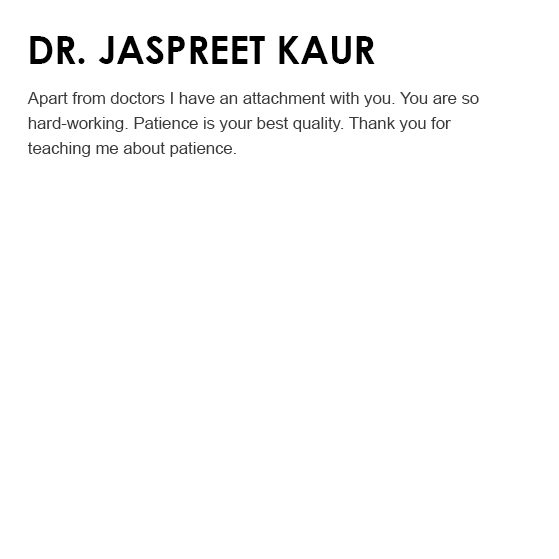
<style>
.page{position:relative;width:559px;height:559px;background:#ffffff}
.page>*{position:absolute;margin:0}
.t1{font:38.6px "CenturyGothic-Bold";color:#000000;text-transform:uppercase}
.t2{font:16.7px/25px "ArialMT";color:#3a3a3a}
</style>
<div class="page">
<p class="t1" style="left:30px;top:36px;width:345px;height:28px">Dr. Jaspreet Kaur</p>
<p class="t2" style="left:27px;top:92px;width:452px;height:65px">Apart from doctors I have an attachment with you. You are so <br>hard-working. Patience is your best quality. Thank you for <br>teaching me about patience.</p>
</div>
